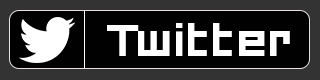
<style>
.page{position:relative;width:320px;height:80px;background:#010101}
.page>*{position:absolute;margin:0}
.t1{font:60px "FORCED-SQUARE";color:#fefefe}
</style>
<div class="page">
<p class="t1" style="left:107px;top:23px;width:183px;height:33px">Twitter</p>
</div>
